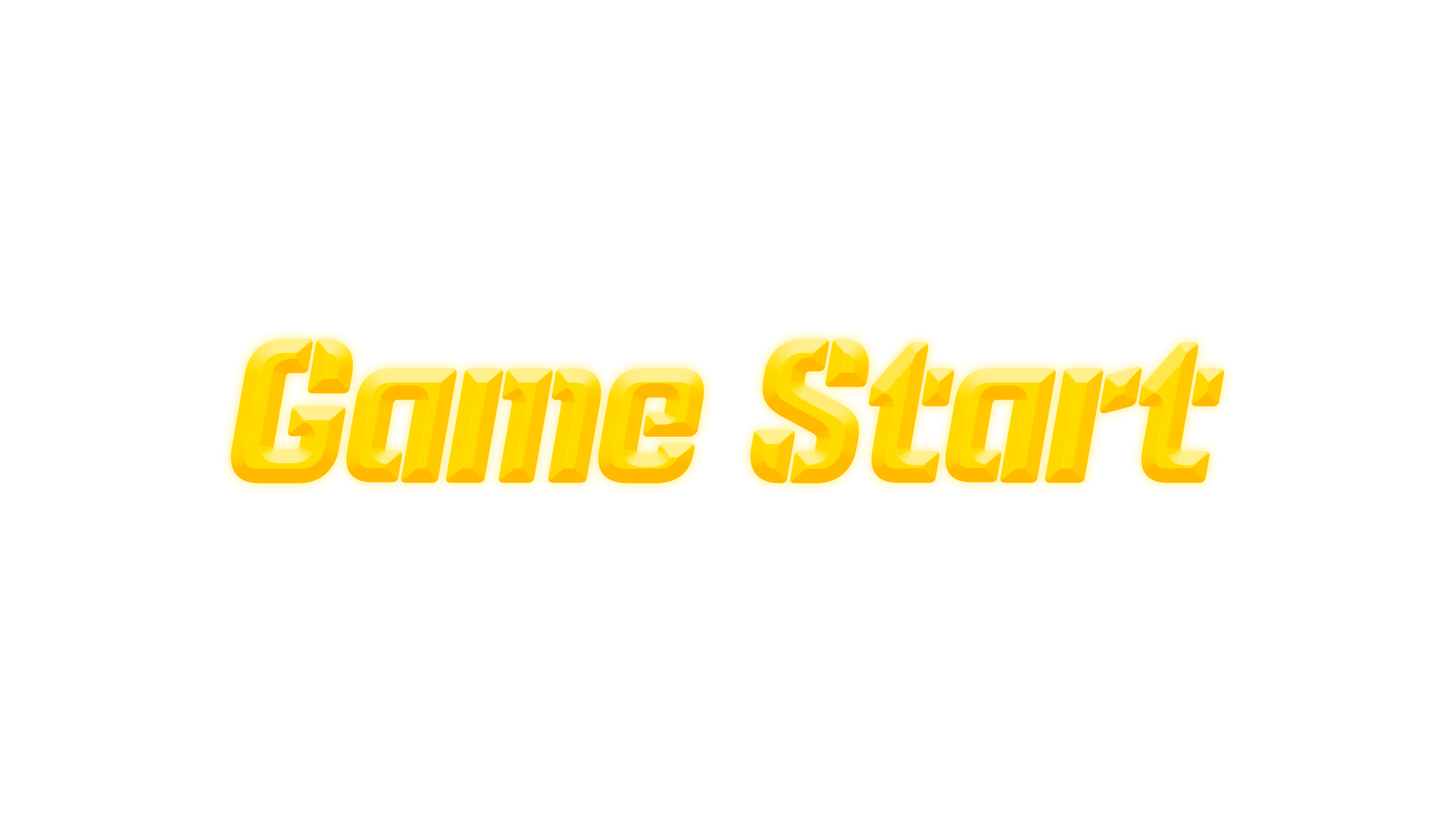
<style>
.page{position:relative;width:1456px;height:819px;background:#ffffff}
.page>*{position:absolute;margin:0}
.t1{font:163.8px "SDComicStencil-aBasic";letter-spacing:-0.03em;color:#ffdc00;font-weight:bold;font-style:italic}
</style>
<div class="page">
<p class="t1" style="left:231px;top:338px;width:994px;height:146px">Game Start</p>
</div>
